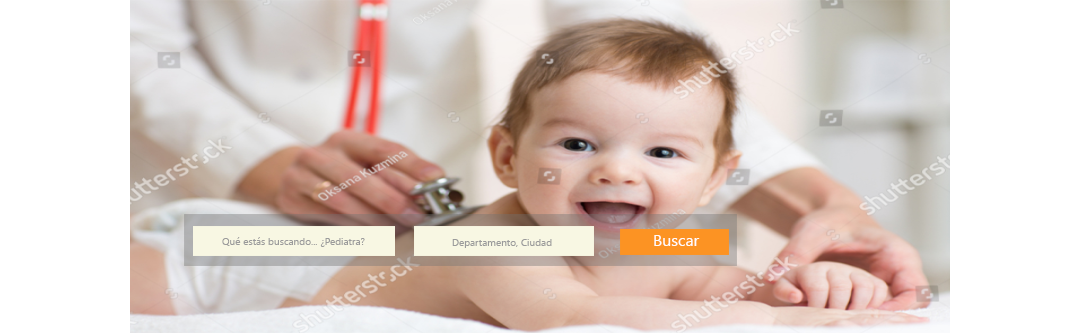
<style>
.page{position:relative;width:1080px;height:333px;background:#ffffff}
.page>*{position:absolute;margin:0}
.t1{font:10px "SegoeUIHistoric";color:#9a9a9a}
.t2{font:10px "SegoeUIHistoric";color:#9b9b9b}
.t3{font:16px "SegoeUIHistoric";color:#fffcfc}
</style>
<div class="page">
<p class="t1" style="left:222px;top:237px;width:143px;height:10px">Qué estás buscando... ¿Pediatra?</p>
<p class="t2" style="left:452px;top:239px;width:100px;height:9px">Departamento, Ciudad</p>
<p class="t3" style="left:654px;top:235px;width:46px;height:11px">Buscar</p>
</div>
